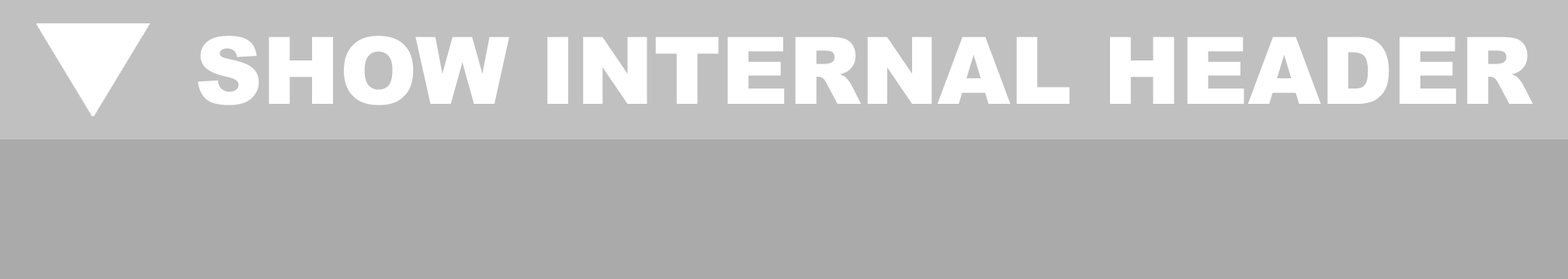
<style>
.page{position:relative;width:1568px;height:279px;background:#aaaaaa}
.page>*{position:absolute;margin:0}
.t1{font:93.1px "Arial-Black";color:#ffffff}
</style>
<div class="page">
<p class="t1" style="left:198px;top:36px;width:1335px;height:70px">SHOW INTERNAL HEADER</p>
</div>
